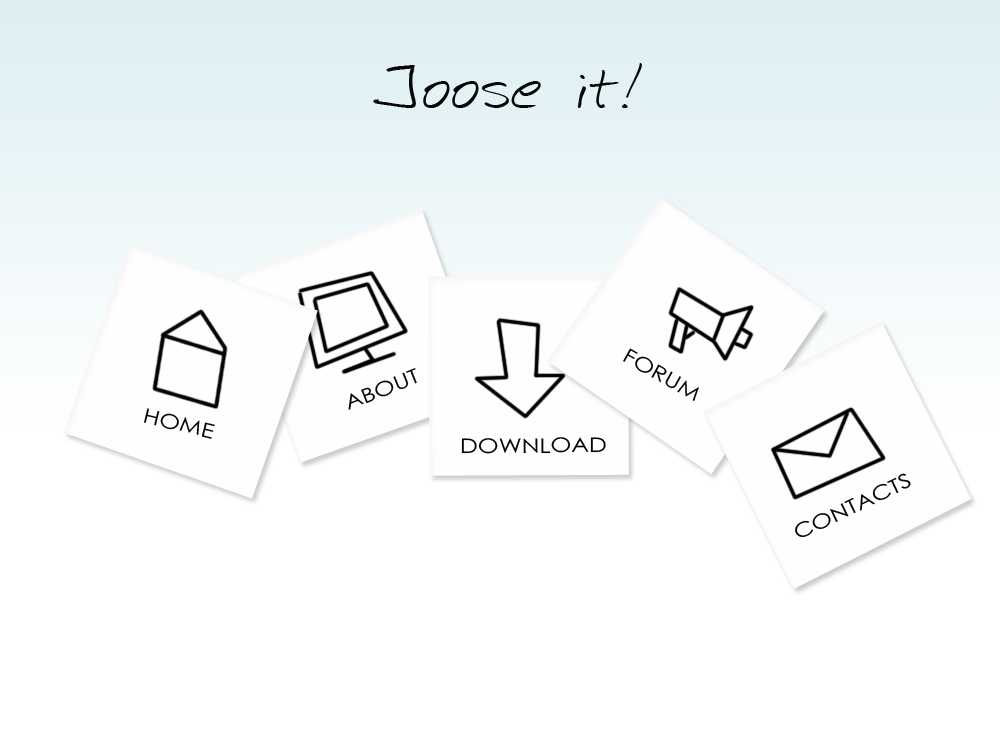
<style>
.page{position:relative;width:1000px;height:752px;background:#ffffff}
.page>*{position:absolute;margin:0}
.t1{font:20px "CenturyGothic";color:#040404;scale:1.2 1}
</style>
<div class="page">
<p class="t1" style="left:623px;top:348px;width:76px;height:53px;rotate:29deg">FORUM</p>
<p class="t1" style="left:348px;top:368px;width:69px;height:42px;rotate:-22deg">ABOUT</p>
<p class="t1" style="left:144px;top:408px;width:71px;height:31px;rotate:14deg">HOME</p>
<p class="t1" style="left:461px;top:437px;width:145px;height:17px;rotate:-1deg">DOWNLOAD</p>
<p class="t1" style="left:795px;top:473px;width:116px;height:65px;rotate:-26deg">CONTACTS</p>
</div>
